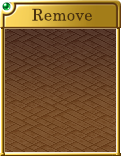
<style>
.page{position:relative;width:124px;height:156px}
.page>*{position:absolute;margin:0}
.t1{font:16px "CenturySchoolbook";letter-spacing:0.025em;color:#4b320e}
</style>
<div class="page">
<p class="t1" style="left:32px;top:8px;width:60px;height:13px">Remove</p>
</div>
